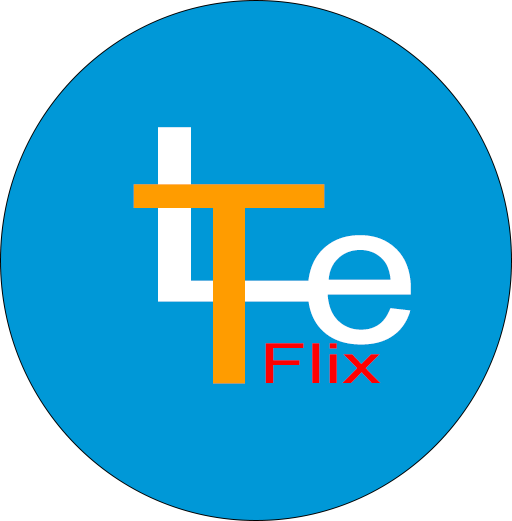
<style>
.page{position:relative;width:512px;height:521px;background:#0098d7}
.page>*{position:absolute;margin:0}
.t1{font:243.1px "ArialMT";color:#ffffff;scale:1.42 1}
.t2{font:277.8px "ArialMT";letter-spacing:0.001em;color:#ff9c00;scale:1.21 1}
.t3{font:201.4px "ArialMT";color:#ffffff;scale:1.07 1}
.t4{font:55.6px "ArialMT";color:#ff0000;scale:1.41 1}
</style>
<div class="page">
<p class="t1" style="left:158px;top:127px;width:155px;height:175px">L</p>
<p class="t2" style="left:133px;top:184px;width:192px;height:200px">T</p>
<p class="t3" style="left:308px;top:235px;width:103px;height:110px">e</p>
<p class="t4" style="left:265px;top:343px;width:116px;height:40px">Flix</p>
</div>
